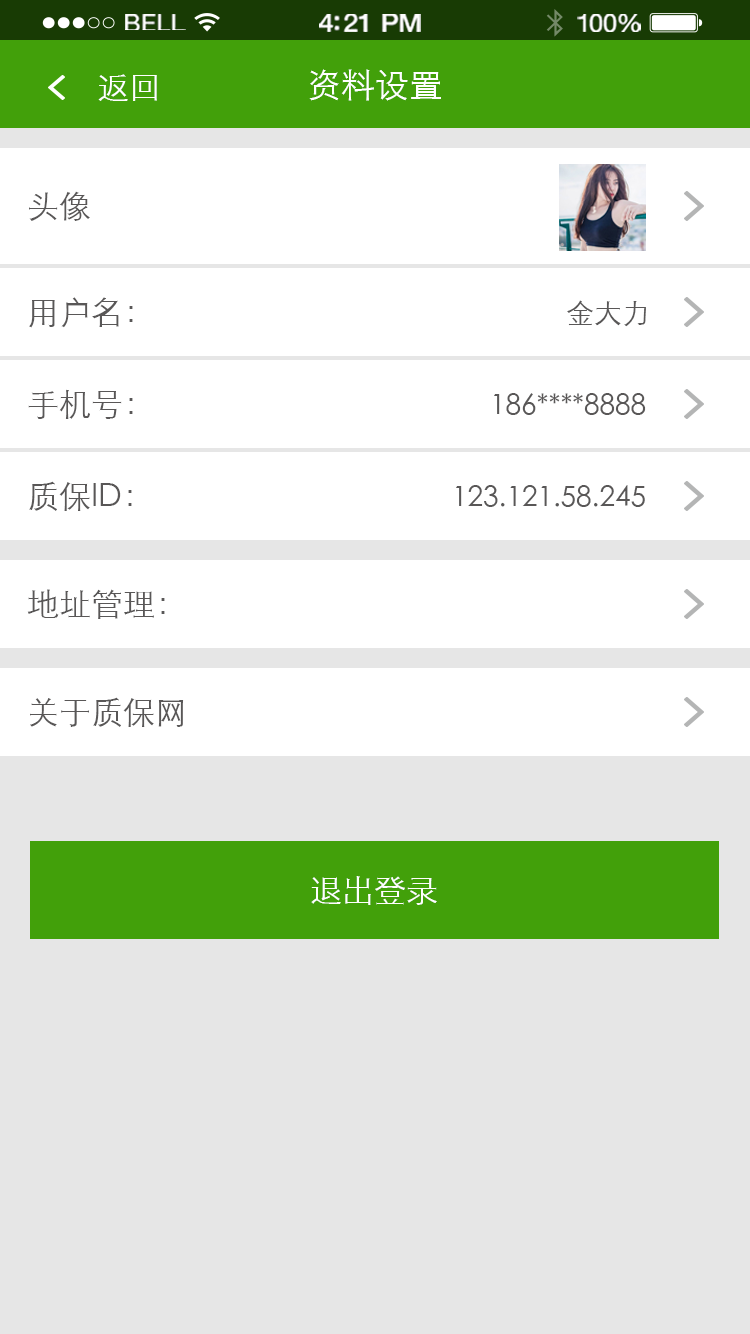
<style>
.page{position:relative;width:750px;height:1334px;background:#e6e6e6}
.page>*{position:absolute;margin:0}
.t1{font:23.3px "HelveticaNeue";letter-spacing:0.02em;color:#ffffff;scale:1.06 1}
.t2{font:25.3px "HelveticaNeue-Medium";letter-spacing:-0.02em;color:#ffffff;scale:1.06 1}
.t3{font:24.3px "HelveticaNeue";letter-spacing:-0.02em;color:#ffffff;scale:1.06 1}
.t4{font:32px "STXihei";color:#ffffff}
.t5{font:34px "STXihei";color:#ffffff}
.t6{font:32px "STXihei";color:#595757}
.t7{font:28px "STXihei";color:#595757}
.t8{font:32px "STXihei";color:#fffefe}
</style>
<div class="page">
<p class="t1" style="left:125px;top:14px;width:61px;height:16px">BELL</p>
<p class="t2" style="left:319px;top:14px;width:102px;height:18px">4:21 PM</p>
<p class="t3" style="left:577px;top:14px;width:64px;height:18px">100%</p>
<p class="t4" style="left:98px;top:74px;width:59px;height:27px">返回</p>
<p class="t5" style="left:309px;top:69px;width:132px;height:32px">资料设置</p>
<p class="t6" style="left:29px;top:191px;width:61px;height:30px">头像</p>
<p class="t6" style="left:29px;top:297px;width:104px;height:31px">用户名：</p>
<p class="t7" style="left:567px;top:300px;width:79px;height:27px">金大力</p>
<p class="t6" style="left:28px;top:389px;width:105px;height:30px">手机号：</p>
<p class="t7" style="left:494px;top:393px;width:152px;height:22px">186****8888</p>
<p class="t6" style="left:29px;top:481px;width:103px;height:30px">质保ID：</p>
<p class="t7" style="left:456px;top:485px;width:189px;height:22px">123.121.58.245</p>
<p class="t6" style="left:27px;top:589px;width:138px;height:30px">地址管理：</p>
<p class="t6" style="left:30px;top:697px;width:154px;height:30px">关于质保网</p>
<p class="t8" style="left:311px;top:876px;width:126px;height:29px">退出登录</p>
</div>
